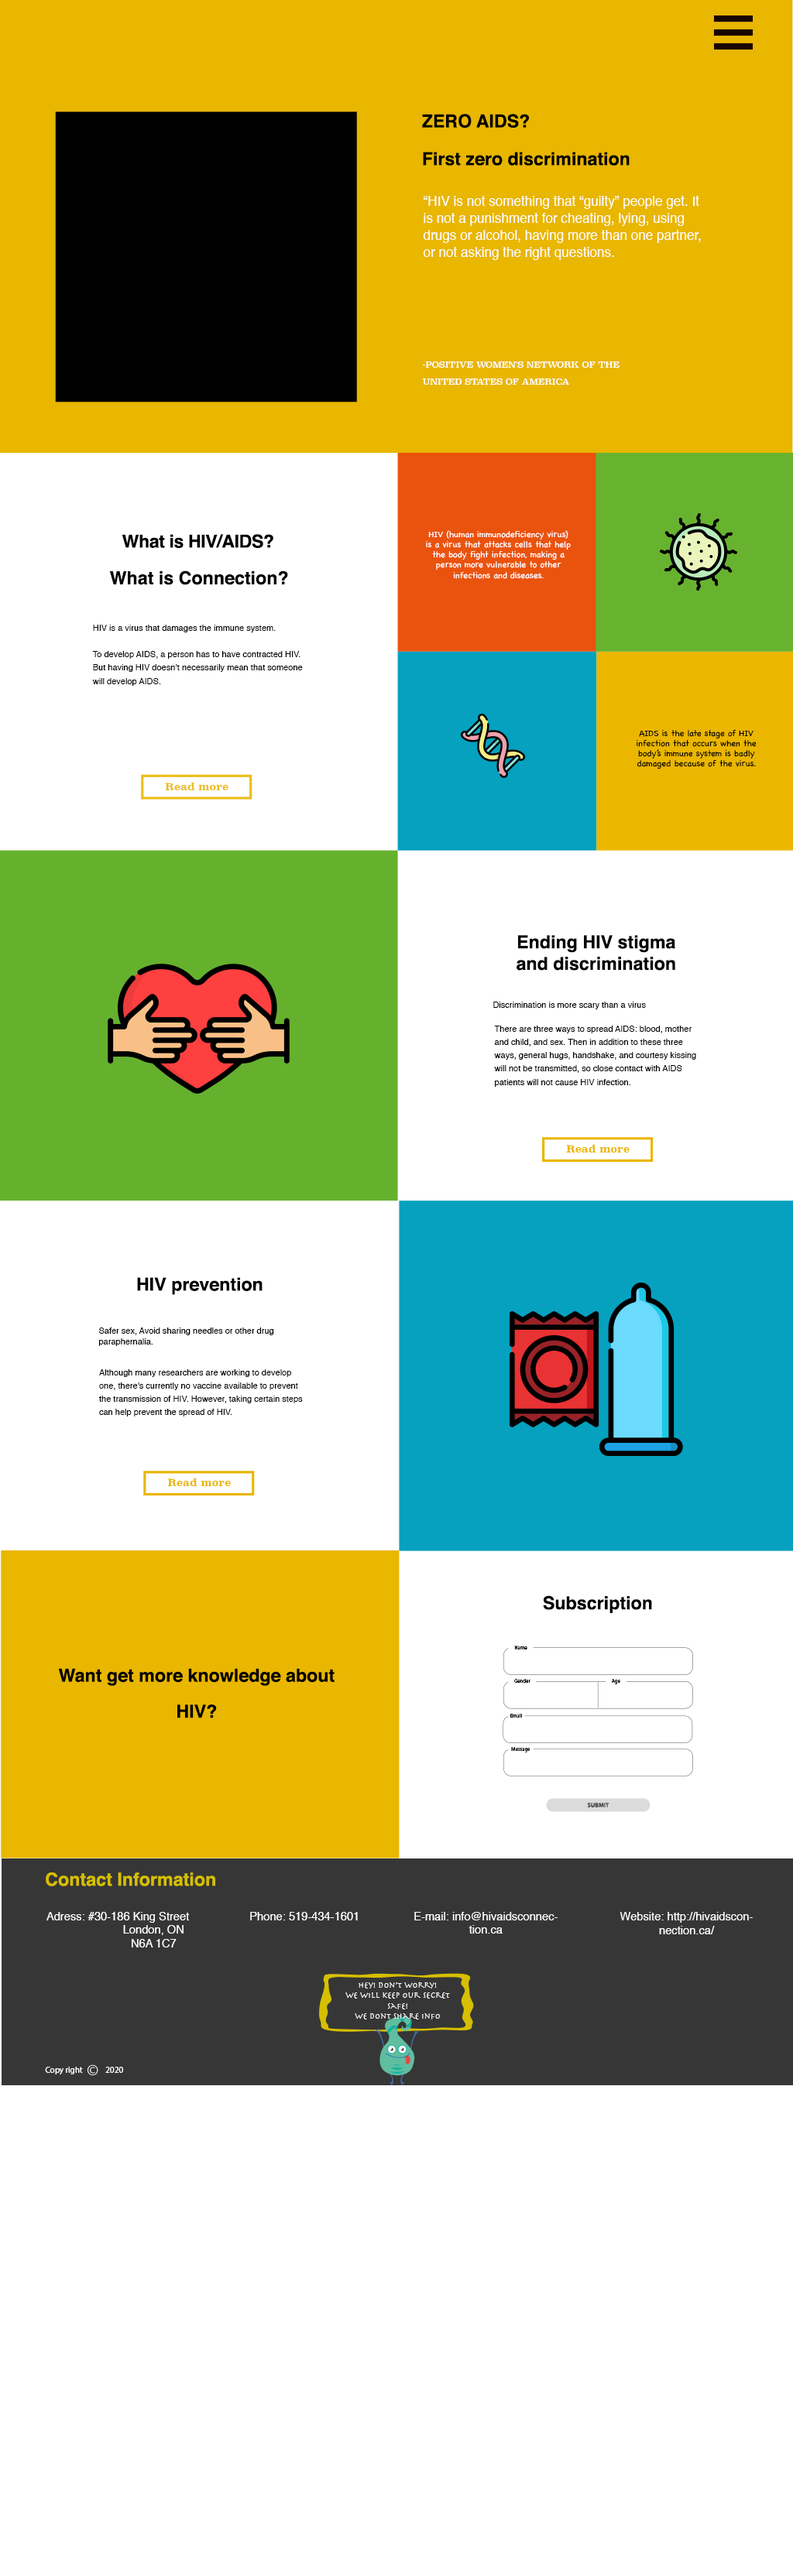
<style>
.page{position:relative;width:793px;height:2576px;background:#ffffff}
.page>*{position:absolute;margin:0}
.t1{font:17.9px/37.7px "Helvetica-Bold";color:#000000}
.t2{font:13.2px/17px "Helvetica";color:#ffffff}
.t3{font:8.5px/17px "Superclarendon-Regular";color:#ffffff}
.t4{font:8.5px "Chalkboard";color:#ffffff}
.t5{font:18px "Helvetica-Bold";letter-spacing:-0.02em;color:#000000}
.t6{font:18px "Helvetica-Bold";color:#000000}
.t7{font:8.5px/13.3px "Helvetica";color:#000000}
.t8{font:8.5px/14.2px "Helvetica";color:#000000}
.t9{font:8.5px "Chalkboard";color:#000000}
.t10{font:9.9px "Superclarendon-Bold";color:#ebbd19}
.t11{font:8.5px "Helvetica";color:#000000}
.t12{font:9.9px "Superclarendon-Bold";color:#eab600}
.t13{font:9.9px "Superclarendon-Bold";color:#e9b600}
.t14{font:5.1px "MyriadPro-Regular";letter-spacing:-0.01em;color:#000000}
.t15{font:18px/36px "Helvetica-Bold";color:#000000}
.t16{font:5.2px "MyriadPro-Regular";letter-spacing:-0.01em;color:#000000}
.t17{font:5.1px "MyriadPro-Regular";letter-spacing:-0.01em;color:#000000;scale:1.03 1}
.t18{font:6.2px "MyriadPro-Bold";letter-spacing:-0.01em;color:#434343}
.t19{font:18px "Helvetica-Bold";color:#d6bf00}
.t20{font:11.3px "Helvetica";color:#ffffff}
.t21{font:8.5px "Herculanum";color:#ffffff}
.t22{font:8.5px "MyriadPro-Regular";color:#ffffff}
</style>
<div class="page">
<p class="t1" style="left:422px;top:114px;width:207px;height:52px;text-align:right">ZERO AIDS?<br>First zero discrimination</p>
<p class="t2" style="left:423px;top:196px;width:278px;height:64px;text-align:right">“HIV is not something that “guilty” people get. It is not a punishment for cheating, lying, using drugs or alcohol, having more than one partner, or not asking the right questions.</p>
<p class="t3" style="left:422px;top:361px;width:197px;height:24px;text-align:right">-POSITIVE WOMEN'S NETWORK OF THE UNITED STATES OF AMERICA</p>
<p class="t4" style="left:426px;top:530px;width:144px;height:49px;text-align:center">HIV (human immunodeficiency virus) is a virus that attacks cells that help the body fight infection, making a person more vulnerable to other <br>infections and diseases.</p>
<p class="t5" style="left:122px;top:534px;width:151px;height:14px">What is HIV/AIDS?</p>
<p class="t6" style="left:109px;top:570px;width:179px;height:15px">What is Connection?</p>
<p class="t7" style="left:92px;top:625px;width:211px;height:61px;text-align:right"><span class="t8">HIV is a virus that damages the immune system. <br></span><br>To develop AIDS, a person has to have contracted HIV. But having HIV doesn’t necessarily mean that someone will develop AIDS.</p>
<p class="t9" style="left:636px;top:730px;width:120px;height:39px;text-align:center">AIDS is the late stage of HIV <br>infection that occurs when the body’s immune system is badly <br>damaged because of the virus.</p>
<p class="t10" style="left:165px;top:783px;width:63px;height:7px">Read more</p>
<p class="t6" style="left:516px;top:935px;width:159px;height:36px;text-align:center">Ending HIV stigma <br>and discrimination</p>
<p class="t11" style="left:493px;top:1002px;width:153px;height:7px">Discrimination is more scary than a virus</p>
<p class="t7" style="left:494px;top:1026px;width:202px;height:61px;text-align:right">There are three ways to spread AIDS: blood, mother and child, and sex. Then in addition to these three ways, general hugs, handshake, and courtesy kissing will not be transmitted, so close contact with AIDS <br>patients will not cause HIV infection.</p>
<p class="t12" style="left:566px;top:1145px;width:63px;height:8px">Read more</p>
<p class="t6" style="left:137px;top:1277px;width:125px;height:18px">HIV prevention</p>
<p class="t11" style="left:99px;top:1327px;width:175px;height:19px;text-align:right">Safer sex, Avoid sharing needles or other drug <br>paraphernalia.</p>
<p class="t7" style="left:99px;top:1369px;width:204px;height:47px;text-align:right">Although many researchers are working to develop one, there’s currently no vaccine available to prevent the transmission of HIV. However, taking certain steps can help prevent the spread of HIV.</p>
<p class="t13" style="left:168px;top:1478px;width:63px;height:8px">Read more</p>
<p class="t6" style="left:543px;top:1595px;width:109px;height:18px">Subscription</p>
<p class="t14" style="left:514px;top:1646px;width:13px;height:3px">Name</p>
<p class="t15" style="left:58px;top:1668px;width:276px;height:50px;text-align:center">Want get more knowledge about HIV?</p>
<p class="t16" style="left:514px;top:1679px;width:16px;height:4px">Gender</p>
<p class="t16" style="left:611px;top:1679px;width:9px;height:5px">Age</p>
<p class="t16" style="left:510px;top:1714px;width:12px;height:4px">Email</p>
<p class="t17" style="left:511px;top:1747px;width:19px;height:5px">Message</p>
<p class="t18" style="left:587px;top:1803px;width:22px;height:4px">SUBMIT</p>
<p class="t19" style="left:46px;top:1872px;width:169px;height:14px">Contact Information</p>
<p class="t20" style="left:46px;top:1912px;width:144px;height:35px;text-align:right">Adress: #30-186 King Street<br>London, ON<br>N6A 1C7</p>
<p class="t20" style="left:250px;top:1912px;width:108px;height:8px">Phone: 519-434-1601</p>
<p class="t20" style="left:414px;top:1912px;width:143px;height:22px;text-align:center">E-mail: info@hivaidsconnection.ca</p>
<p class="t20" style="left:619px;top:1912px;width:133px;height:22px;text-align:center">Website: http://hivaidsconnection.ca/</p>
<p class="t21" style="left:345px;top:1982px;width:105px;height:37px;text-align:center">Hey! Don’t worry! <br>WE will keep our secret safe!<br>We dont share info</p>
<p class="t22" style="left:45px;top:2067px;width:38px;height:7px">Copy right</p>
<p class="t22" style="left:105px;top:2067px;width:18px;height:6px">2020</p>
</div>
